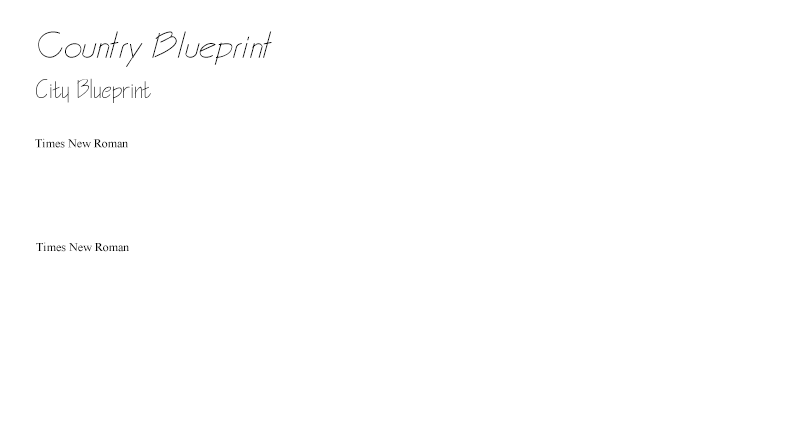
<style>
.page{position:relative;width:801px;height:436px;background:#ffffff}
.page>*{position:absolute;margin:0}
.t1{font:32px "CountryBlueprint";color:#000000}
.t2{font:24px "CityBlueprint";color:#000000}
.t3{font:12px "TimesNewRomanPSMT";color:#000000}
</style>
<div class="page">
<p class="t1" style="left:38px;top:31px;width:234px;height:36px">Country Blueprint</p>
<p class="t2" style="left:36px;top:78px;width:115px;height:25px">City Blueprint</p>
<p class="t3" style="left:35px;top:138px;width:93px;height:10px">Times New Roman</p>
<p class="t3" style="left:36px;top:242px;width:93px;height:10px">Times New Roman</p>
</div>
